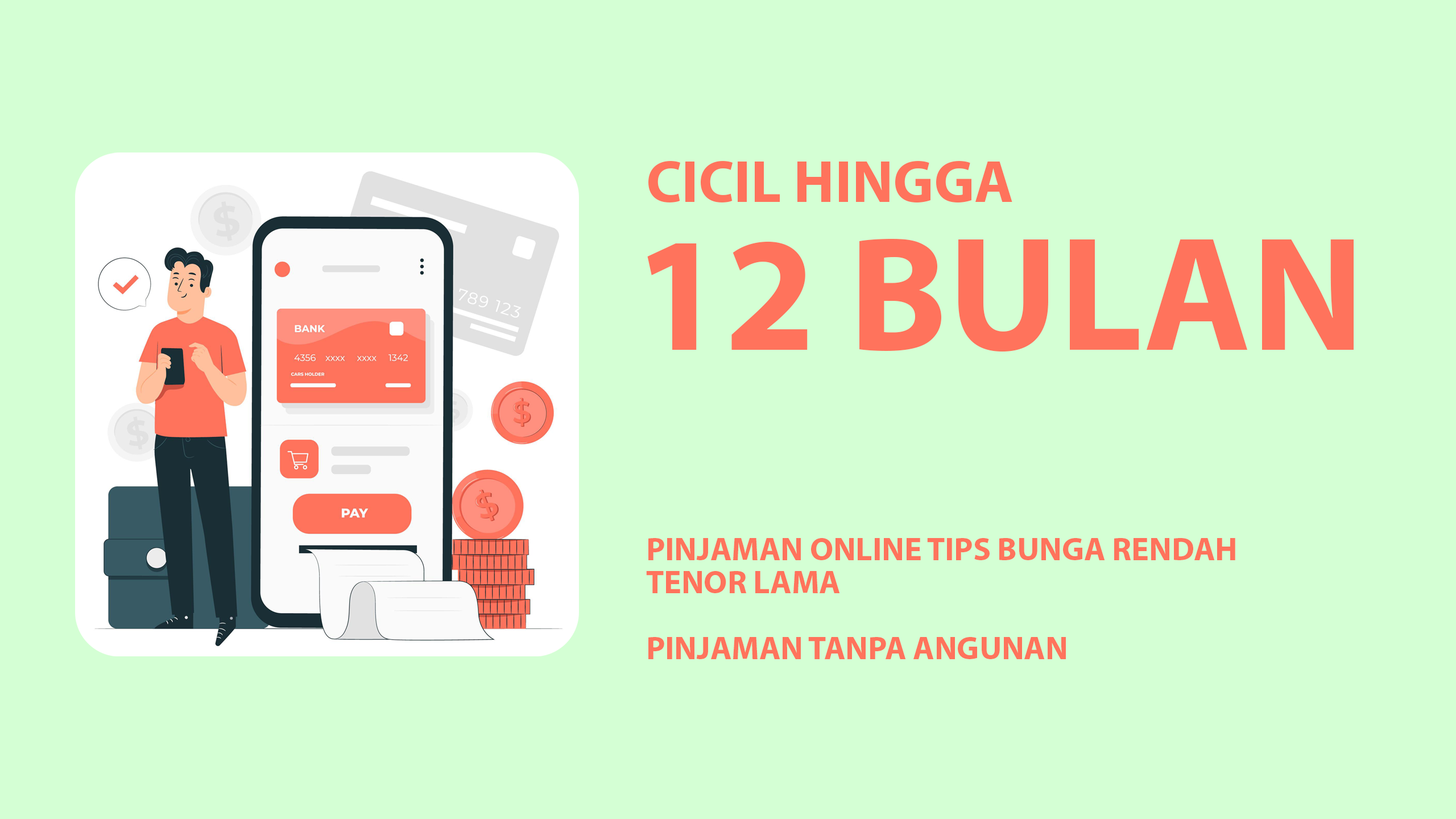
<style>
.page{position:relative;width:1456px;height:819px;background:#d4ffd4}
.page>*{position:absolute;margin:0}
.t1{font:59.7px "MyriadPro-Bold";color:#ff735c}
.t2{font:163.8px "MyriadPro-Bold";color:#ff735c}
.t3{font:32.7px/33px "MyriadPro-Bold";color:#ff735c}
</style>
<div class="page">
<p class="t1" style="left:648px;top:161px;width:364px;height:41px">CICIL HINGGA</p>
<p class="t2" style="left:647px;top:239px;width:707px;height:113px">12 BULAN</p>
<p class="t3" style="left:646px;top:538px;width:589px;height:121px">PINJAMAN ONLINE TIPS BUNGA RENDAH<br>TENOR LAMA<br><br>PINJAMAN TANPA ANGUNAN</p>
</div>
